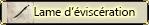
<style>
.page{position:relative;width:149px;height:25px;background:#d9d5bd}
.page>*{position:absolute;margin:0}
.t1{font:11.7px "LaoUI";color:#000000}
</style>
<div class="page">
<p class="t1" style="left:34px;top:7px;width:101px;height:9px">Lame d’éviscération</p>
</div>
